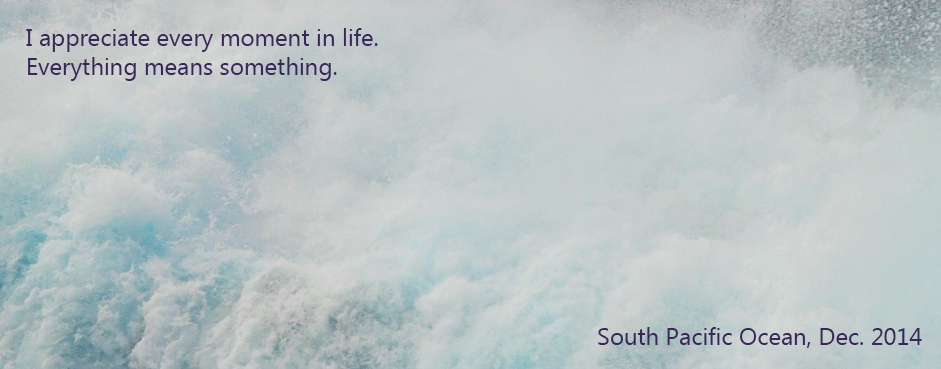
<style>
.page{position:relative;width:941px;height:369px}
.page>*{position:absolute;margin:0}
.t1{font:24px "MicrosoftTaiLe";color:#39275b}
</style>
<div class="page">
<p class="t1" style="left:26px;top:28px;width:352px;height:53px">I appreciate every moment in life. <br>Everything means something.</p>
<p class="t1" style="left:598px;top:327px;width:324px;height:21px">South Pacific Ocean, Dec. 2014</p>
</div>
